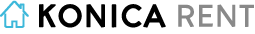
<style>
.page{position:relative;width:255px;height:34px;background:#ffffff}
.page>*{position:absolute;margin:0}
.t1{font:32px "AronGrotesque-Regular";color:#000000;font-weight:bold}
.t2{font:32px "AronGrotesque-Regular";color:#898989}
</style>
<div class="page">
<p class="t1" style="left:39px;top:4px;width:215px;height:24px">KONICA <span class="t2">RENT</span></p>
</div>
